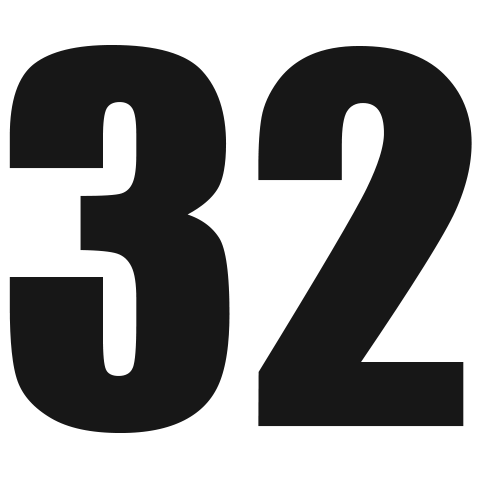
<style>
.page{position:relative;width:480px;height:480px;background:#171717}
.page>*{position:absolute;margin:0}
.t1{font:472.3px "Impact";color:#171717}
</style>
<div class="page">
<p class="t1" style="left:9px;top:45px;width:463px;height:388px">32</p>
</div>
